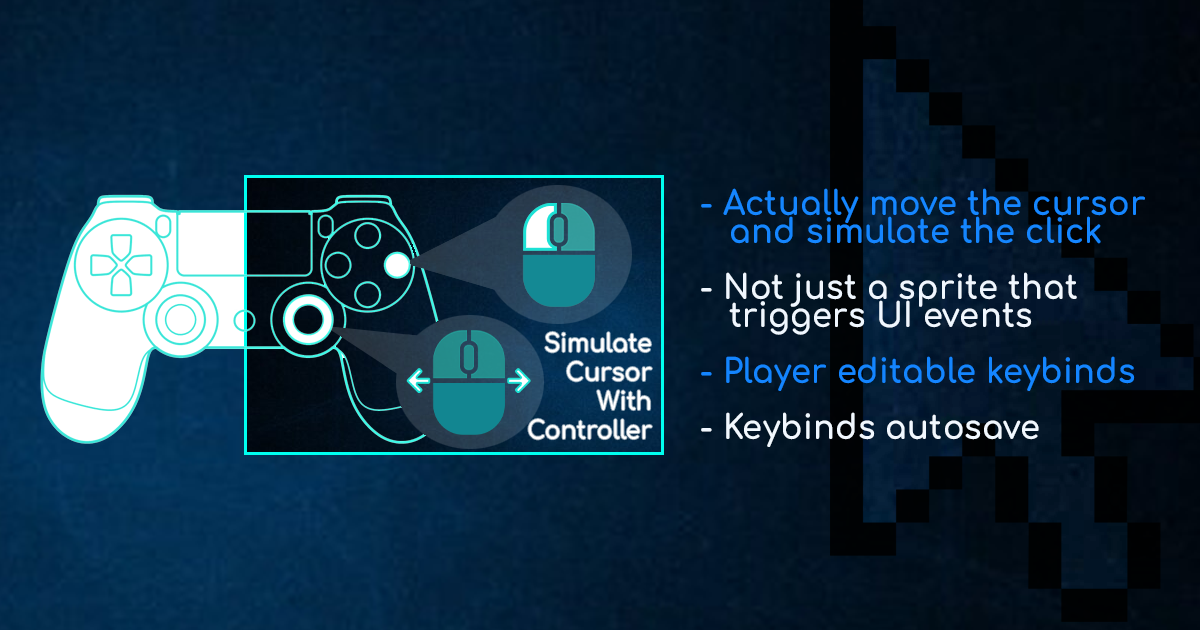
<style>
.page{position:relative;width:1200px;height:630px}
.page>*{position:absolute;margin:0}
.t1{font:33.6px/28px "Comfortaa-Bold";letter-spacing:0.01em;color:#1586ff;scale:0.95 1}
.t2{font:33.6px/28px "Comfortaa-Bold";letter-spacing:0.01em;color:#f0f7ff;scale:0.95 1}
.t3{font:33.6px/28px "Comfortaa-Bold";letter-spacing:0.01em;color:#ffffff;scale:0.95 1}
.t4{font:33.6px/28px "Comfortaa-Bold";letter-spacing:0.01em;color:#1485ff;scale:0.95 1}
.t5{font:33.6px/28px "Comfortaa-Bold";letter-spacing:0.01em;color:#f1f8ff;scale:0.95 1}
.t6{font:25.2px "Comfortaa-Bold";letter-spacing:-0.01em;color:#ffffff;scale:0.95 1}
</style>
<div class="page">
<p class="t1" style="left:701px;top:188px;width:444px;height:259px">- Actually move the cursor<br>   and simulate the click<br><br><span class="t2">- Not just a sprite that<br>   triggers UI events<br></span><span class="t3"><br></span><span class="t4">- Player editable keybinds<br><br></span><span class="t5">- Keybinds autosave</span></p>
<p class="t6" style="left:528px;top:331px;width:124px;height:109px;text-align:right">Simulate<br>Cursor<br>With<br>Controller</p>
</div>
